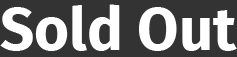
<style>
.page{position:relative;width:237px;height:57px;background:#333333}
.page>*{position:absolute;margin:0}
.t1{font:60px "FiraSans-Bold";color:#ffffff}
</style>
<div class="page">
<p class="t1" style="left:0px;top:4px;width:237px;height:47px">Sold Out</p>
</div>
